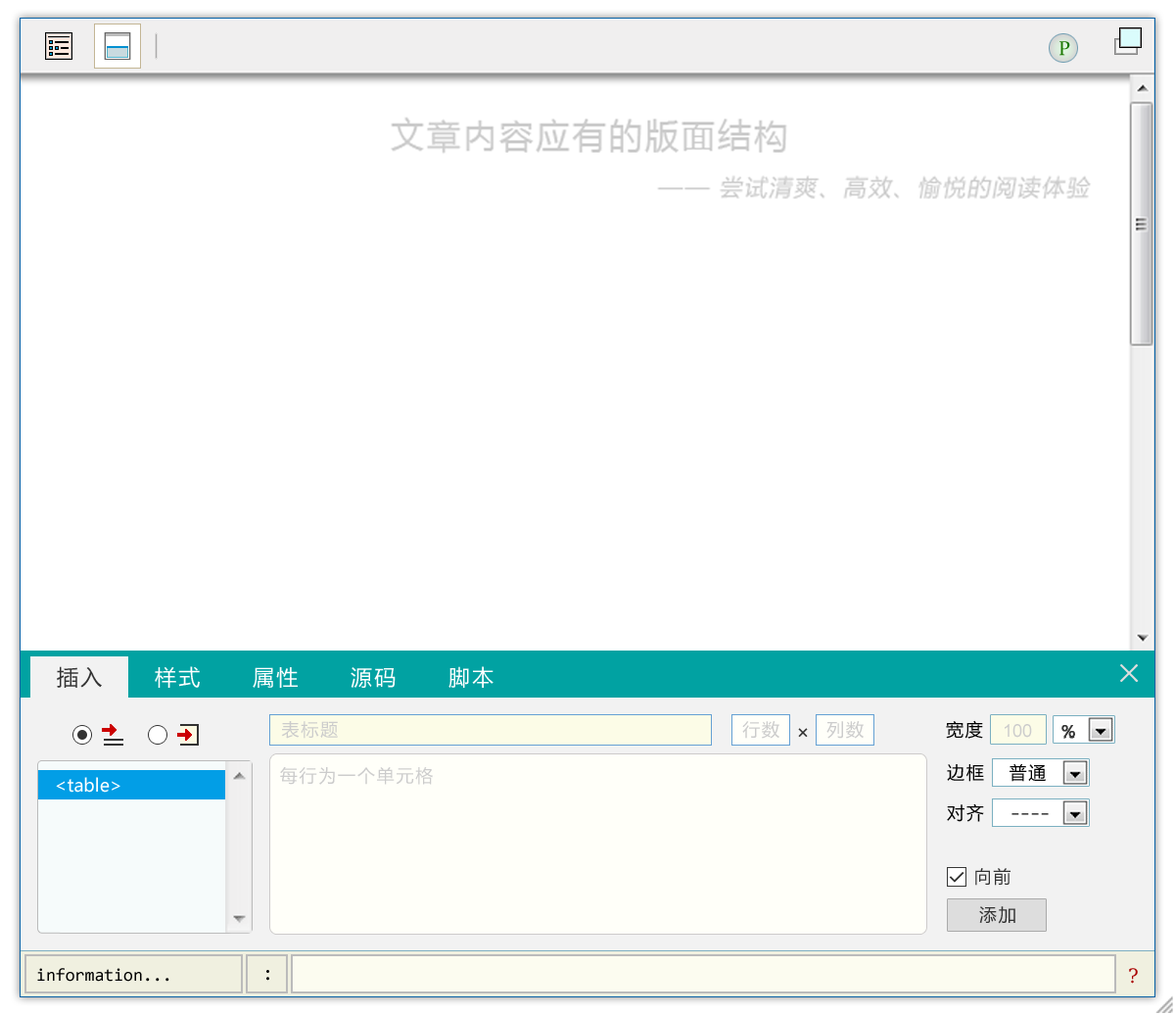
<style>
.page{position:relative;width:1175px;height:1015px;background:#ffffff}
.page>*{position:absolute;margin:0}
.t1{font:19.6px "Constantia";color:#1b7802}
.t2{font:21.5px "MicrosoftYaHei";letter-spacing:0.1em;color:#333333}
.t3{font:21.5px "MicrosoftYaHei";letter-spacing:0.1em;color:#ffffff}
.t4{font:27.4px "NSimSun";letter-spacing:0.1em;color:#dddddd;font-weight:bold}
.t5{font:17.6px "MicrosoftYaHei";letter-spacing:0.1em;color:#cccccc}
.t6{font:17.6px "MicrosoftYaHei";letter-spacing:0.1em;color:#000000}
.t7{font:17.6px "ArialMT";color:#cccccc}
.t8{font:19.6px "DejaVuSansMono";letter-spacing:0.1em;color:#333333}
.t9{font:17.6px "MicrosoftYaHei";color:#ffffff}
.t10{font:17.6px "Courier"}
.t11{font:17.6px "MicrosoftYaHei";letter-spacing:0.1em;color:#333333}
.t12{font:17.6px "Consolas";color:#000000}
.t13{font:19.6px "Consolas";color:#000000}
.t14{font:19.6px "DejaVuSerif";color:#aa0000}
</style>
<div class="page">
<p class="t1" style="left:1060px;top:41px;width:10px;height:15px">P</p>
<p class="t2" style="left:57px;top:666px;width:45px;height:22px">插入</p>
<p class="t3" style="left:155px;top:666px;width:45px;height:22px">样式</p>
<p class="t3" style="left:449px;top:666px;width:45px;height:22px">脚本</p>
<p class="t4" style="left:1120px;top:664px;width:19px;height:18px">×</p>
<p class="t3" style="left:253px;top:667px;width:45px;height:21px">属性</p>
<p class="t3" style="left:351px;top:667px;width:45px;height:21px">源码</p>
<p class="t5" style="left:281px;top:721px;width:57px;height:17px">表标题</p>
<p class="t5" style="left:742px;top:721px;width:38px;height:17px">行数</p>
<p class="t5" style="left:827px;top:721px;width:37px;height:17px">列数</p>
<p class="t6" style="left:946px;top:720px;width:37px;height:18px">宽度</p>
<p class="t7" style="left:1005px;top:724px;width:27px;height:13px">100</p>
<p class="t8" style="left:798px;top:728px;width:10px;height:9px">×</p>
<p class="t5" style="left:280px;top:767px;width:153px;height:17px">每行为一个单元格</p>
<p class="t6" style="left:947px;top:764px;width:37px;height:18px">边框</p>
<p class="t6" style="left:1010px;top:763px;width:36px;height:19px">普通</p>
<p class="t9" style="left:56px;top:777px;width:64px;height:15px">&lt;table&gt;</p>
<p class="t6" style="left:947px;top:803px;width:37px;height:19px">对齐</p>
<p class="t10" style="left:1012px;top:813px;width:37px;height:2px">----</p>
<p class="t11" style="left:975px;top:868px;width:36px;height:17px">向前</p>
<p class="t11" style="left:979px;top:906px;width:37px;height:18px">添加</p>
<p class="t12" style="left:37px;top:968px;width:132px;height:13px">information...</p>
<p class="t13" style="left:266px;top:970px;width:3px;height:10px">:</p>
<p class="t14" style="left:1129px;top:968px;width:9px;height:15px">?</p>
</div>
